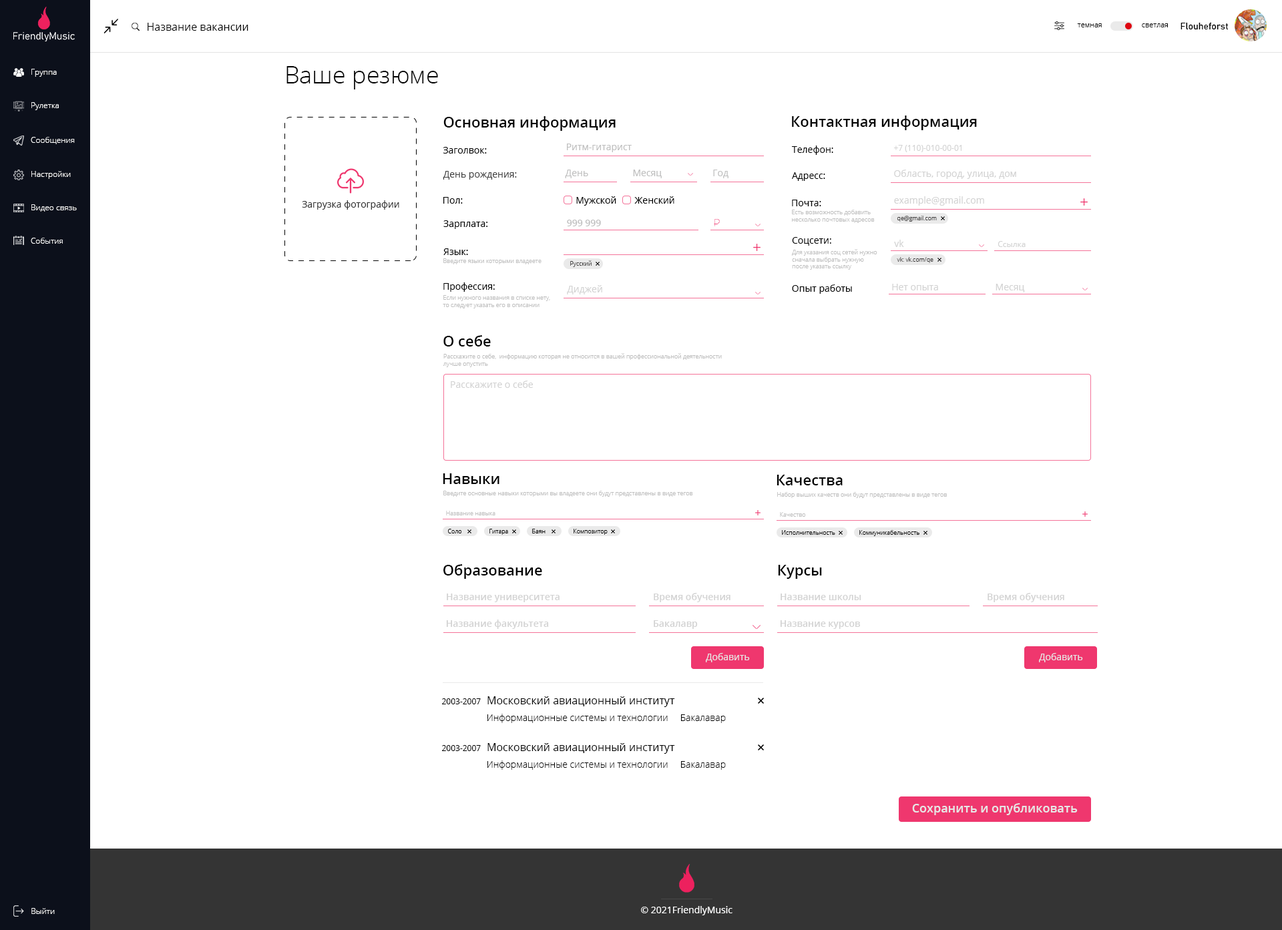
<style>
.page{position:relative;width:1282px;height:930px;background:#ffffff}
.page>*{position:absolute;margin:0}
.t1{font:10.7px "OpenSans";color:#000000}
.t2{font:7.3px "OpenSans-Light";color:#000000}
.t3{font:9.3px "Bahnschrift";color:#000000}
.t4{font:8px "OpenSans-Light";color:#ffffff}
.t5{font:24px "OpenSans-Light";color:#000000}
.t6{font:14.7px "OpenSans-Semibold";color:#000000}
.t7{font:9.3px "aakar-medium";color:#000000}
.t8{font:9.3px "aakar-medium";color:#bfbfbf}
.t9{font:8px "aakar-medium";color:#d3d3d3}
.t10{font:9.3px "aakar-medium";color:#404040}
.t11{font:9.3px "aakar-medium";color:#d3d3d3}
.t12{font:9.3px "aakar-medium";color:#343434}
.t13{font:6px "OpenSans-Light";color:#bfbfbf}
.t14{font:9.3px "OpenSans-Semibold";color:#bfbfbf}
.t15{font:6px "OpenSans-Light";color:#424040}
.t16{font:9.3px "OpenSans";color:#d3d3d3}
.t17{font:6px "OpenSans-Light";color:#000000}
.t18{font:9.3px "OpenSans-Semibold";color:#d3d3d3}
.t19{font:9.3px "OpenSans";color:#e6e6e6}
.t20{font:8px "aakar-medium";color:#000000}
.t21{font:10.7px "aakar-medium";color:#000000}
.t22{font:9.3px "OpenSans-Light";color:#000000}
.t23{font:12px "OpenSans-Semibold";color:#e6e6e6}
.t24{font:9.3px "aakar-medium";color:#ffffff}
</style>
<div class="page">
<p class="t1" style="left:148px;top:23px;width:100px;height:8px">Название вакансии</p>
<p class="t2" style="left:1077px;top:23px;width:25px;height:4px">темная</p>
<p class="t2" style="left:1142px;top:23px;width:26px;height:4px">светлая</p>
<p class="t3" style="left:1181px;top:22px;width:48px;height:8px">Flouheforst</p>
<p class="t4" style="left:31px;top:69px;width:26px;height:8px">Группа</p>
<p class="t5" style="left:286px;top:66px;width:152px;height:23px">Ваше резюме</p>
<p class="t4" style="left:31px;top:102px;width:28px;height:8px">Рулетка</p>
<p class="t6" style="left:443px;top:116px;width:173px;height:15px">Основная информация</p>
<p class="t6" style="left:792px;top:116px;width:185px;height:14px">Контактная информация</p>
<p class="t4" style="left:31px;top:137px;width:44px;height:7px">Сообщения</p>
<p class="t7" style="left:443px;top:147px;width:44px;height:7px">Заголвок:</p>
<p class="t8" style="left:567px;top:144px;width:65px;height:8px">Ритм-гитарист</p>
<p class="t7" style="left:792px;top:146px;width:41px;height:9px">Телефон:</p>
<p class="t9" style="left:894px;top:145px;width:68px;height:7px">+7 (110)-010-00-01</p>
<p class="t4" style="left:31px;top:171px;width:40px;height:8px">Настройки</p>
<p class="t10" style="left:443px;top:171px;width:74px;height:9px">День рождения:</p>
<p class="t8" style="left:565px;top:170px;width:23px;height:8px">День</p>
<p class="t8" style="left:633px;top:170px;width:29px;height:8px">Месяц</p>
<p class="t8" style="left:713px;top:170px;width:15px;height:8px">Год</p>
<p class="t7" style="left:792px;top:172px;width:33px;height:9px">Адресс:</p>
<p class="t11" style="left:894px;top:170px;width:122px;height:9px">Область, город, улица, дом</p>
<p class="t7" style="left:443px;top:197px;width:20px;height:7px">Пол:</p>
<p class="t7" style="left:576px;top:196px;width:40px;height:10px">Мужской</p>
<p class="t7" style="left:634px;top:196px;width:40px;height:8px">Женский</p>
<p class="t11" style="left:894px;top:196px;width:90px;height:10px">example@gmail.com</p>
<p class="t4" style="left:31px;top:204px;width:46px;height:8px">Видео связь</p>
<p class="t12" style="left:302px;top:200px;width:97px;height:10px">Загрузка фотографии</p>
<p class="t7" style="left:792px;top:200px;width:29px;height:6px">Почта:</p>
<p class="t13" style="left:792px;top:210px;width:83px;height:13px">Есть возможность добавить <br>несколько почтовых адресов</p>
<p class="t7" style="left:443px;top:220px;width:44px;height:9px">Зарплата:</p>
<p class="t14" style="left:567px;top:220px;width:34px;height:6px">999 999</p>
<p class="t15" style="left:897px;top:216px;width:40px;height:6px">qe@gmail.com</p>
<p class="t4" style="left:31px;top:238px;width:32px;height:6px">События</p>
<p class="t7" style="left:792px;top:237px;width:39px;height:9px">Соцсети:</p>
<p class="t11" style="left:894px;top:240px;width:10px;height:7px">vk</p>
<p class="t9" style="left:998px;top:241px;width:28px;height:6px">Ссылка</p>
<p class="t7" style="left:443px;top:248px;width:25px;height:7px">Язык:</p>
<p class="t13" style="left:792px;top:249px;width:85px;height:21px">Для указания соц сетей нужно<br>сначала выбрать нужную<br>после указать ссылку</p>
<p class="t15" style="left:897px;top:257px;width:36px;height:6px">vk: vk.com/qe</p>
<p class="t13" style="left:443px;top:258px;width:99px;height:6px">Введите языки которыми владеете</p>
<p class="t15" style="left:570px;top:260px;width:22px;height:7px">Русский</p>
<p class="t7" style="left:443px;top:282px;width:52px;height:10px">Профессия:</p>
<p class="t11" style="left:567px;top:285px;width:35px;height:9px">Диджей</p>
<p class="t7" style="left:792px;top:284px;width:60px;height:10px">Опыт работы</p>
<p class="t11" style="left:892px;top:284px;width:46px;height:6px">Нет опыта</p>
<p class="t11" style="left:996px;top:284px;width:29px;height:8px">Месяц</p>
<p class="t13" style="left:443px;top:295px;width:107px;height:13px">Если нужного названия в списке нету,<br>то следует указать его в описании</p>
<p class="t6" style="left:443px;top:335px;width:48px;height:12px">О себе</p>
<p class="t13" style="left:443px;top:353px;width:279px;height:14px">Расскажите о себе,  информацию которая не относится в вашей профессиональной деятельности<br>лучше опустить</p>
<p class="t16" style="left:451px;top:381px;width:82px;height:7px">Расскажите о себе</p>
<p class="t6" style="left:443px;top:473px;width:56px;height:11px">Навыки</p>
<p class="t6" style="left:777px;top:475px;width:66px;height:10px">Качества</p>
<p class="t13" style="left:443px;top:491px;width:250px;height:6px">Введите основные навыки которыми вы владеете они будут представлены в виде тегов</p>
<p class="t13" style="left:777px;top:492px;width:170px;height:6px">Набор выших качеств они будут представлены в виде тегов</p>
<p class="t13" style="left:446px;top:511px;width:49px;height:4px">Название навыка</p>
<p class="t13" style="left:780px;top:512px;width:26px;height:5px">Качество</p>
<p class="t17" style="left:448px;top:529px;width:14px;height:5px">Соло</p>
<p class="t17" style="left:489px;top:529px;width:19px;height:6px">Гитара</p>
<p class="t17" style="left:532px;top:529px;width:14px;height:5px">Баян</p>
<p class="t17" style="left:574px;top:529px;width:34px;height:6px">Композитор</p>
<p class="t17" style="left:782px;top:530px;width:53px;height:5px">Исполнительность</p>
<p class="t17" style="left:859px;top:530px;width:60px;height:6px">Коммуникабельность</p>
<p class="t6" style="left:443px;top:564px;width:99px;height:15px">Образование</p>
<p class="t6" style="left:778px;top:565px;width:44px;height:14px">Курсы</p>
<p class="t18" style="left:447px;top:594px;width:113px;height:8px">Название университета</p>
<p class="t18" style="left:654px;top:593px;width:76px;height:9px">Время обучения</p>
<p class="t18" style="left:781px;top:594px;width:80px;height:6px">Название школы</p>
<p class="t18" style="left:988px;top:593px;width:76px;height:9px">Время обучения</p>
<p class="t18" style="left:446px;top:620px;width:103px;height:9px">Название факультета</p>
<p class="t18" style="left:654px;top:620px;width:44px;height:9px">Бакалавр</p>
<p class="t18" style="left:780px;top:620px;width:80px;height:9px">Название курсов</p>
<p class="t19" style="left:706px;top:653px;width:44px;height:9px">Добавить</p>
<p class="t19" style="left:1039px;top:653px;width:44px;height:9px">Добавить</p>
<p class="t20" style="left:442px;top:698px;width:39px;height:6px">2003-2007</p>
<p class="t21" style="left:487px;top:696px;width:188px;height:11px">Московский авиационный институт</p>
<p class="t22" style="left:487px;top:714px;width:181px;height:9px">Информационные системы и технологии</p>
<p class="t22" style="left:681px;top:714px;width:45px;height:9px">Бакалавар</p>
<p class="t20" style="left:442px;top:745px;width:39px;height:6px">2003-2007</p>
<p class="t21" style="left:487px;top:743px;width:188px;height:11px">Московский авиационный институт</p>
<p class="t22" style="left:487px;top:761px;width:181px;height:9px">Информационные системы и технологии</p>
<p class="t22" style="left:681px;top:761px;width:45px;height:9px">Бакалавар</p>
<p class="t23" style="left:912px;top:803px;width:166px;height:12px">Сохранить и опубликовать</p>
<p class="t4" style="left:31px;top:908px;width:24px;height:6px">Выйти</p>
<p class="t24" style="left:641px;top:906px;width:91px;height:9px">© 2021FriendlyMusic</p>
</div>
